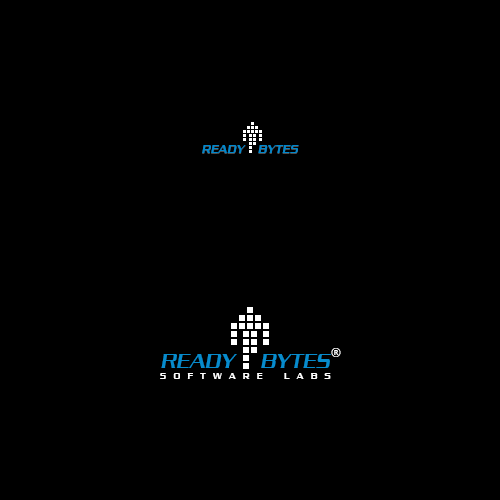
<style>
.page{position:relative;width:500px;height:500px;background:#000000}
.page>*{position:absolute;margin:0}
.t1{font:12px "Dungeon-Regular";color:#0088cc;font-style:italic}
.t2{font:12px "OpenSans";color:#ffffff}
.t3{font:21px "Dungeon-Regular";color:#0aa2dd;font-style:italic}
.t4{font:21px "Dungeon-Regular";color:#09a2dd;font-style:italic}
.t5{font:9px "Dungeon-Regular";letter-spacing:0.802em;color:#ffffff}
</style>
<div class="page">
<p class="t1" style="left:202px;top:145px;width:97px;height:8px">READY    BYTES</p>
<p class="t2" style="left:331px;top:348px;width:10px;height:9px">®</p>
<p class="t3" style="left:161px;top:354px;width:76px;height:14px">READY</p>
<p class="t4" style="left:261px;top:354px;width:70px;height:14px">BYTES</p>
<p class="t5" style="left:160px;top:373px;width:103px;height:6px">SOFTWARE</p>
<p class="t5" style="left:284px;top:373px;width:47px;height:6px">LABS</p>
</div>
